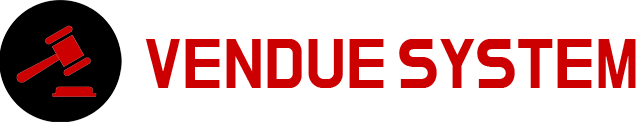
<style>
.page{position:relative;width:636px;height:122px;background:#ffffff}
.page>*{position:absolute;margin:0}
.t1{font:72px "DoHyeon-Regular";color:#cc0001;text-transform:uppercase}
</style>
<div class="page">
<p class="t1" style="left:145px;top:39px;width:239px;height:49px">Vendue</p>
<p class="t1" style="left:399px;top:39px;width:237px;height:49px">System</p>
</div>
